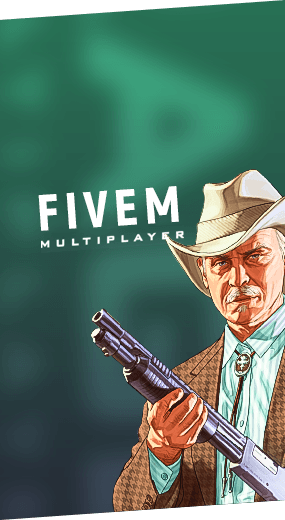
<style>
.page{position:relative;width:285px;height:520px}
.page>*{position:absolute;margin:0}
.t1{font:51px "Akrobat-Black";letter-spacing:0.11em;color:#ffffff}
</style>
<div class="page">
<p class="t1" style="left:38px;top:186px;width:141px;height:45px;rotate:-4deg">FIVEM</p>
</div>
